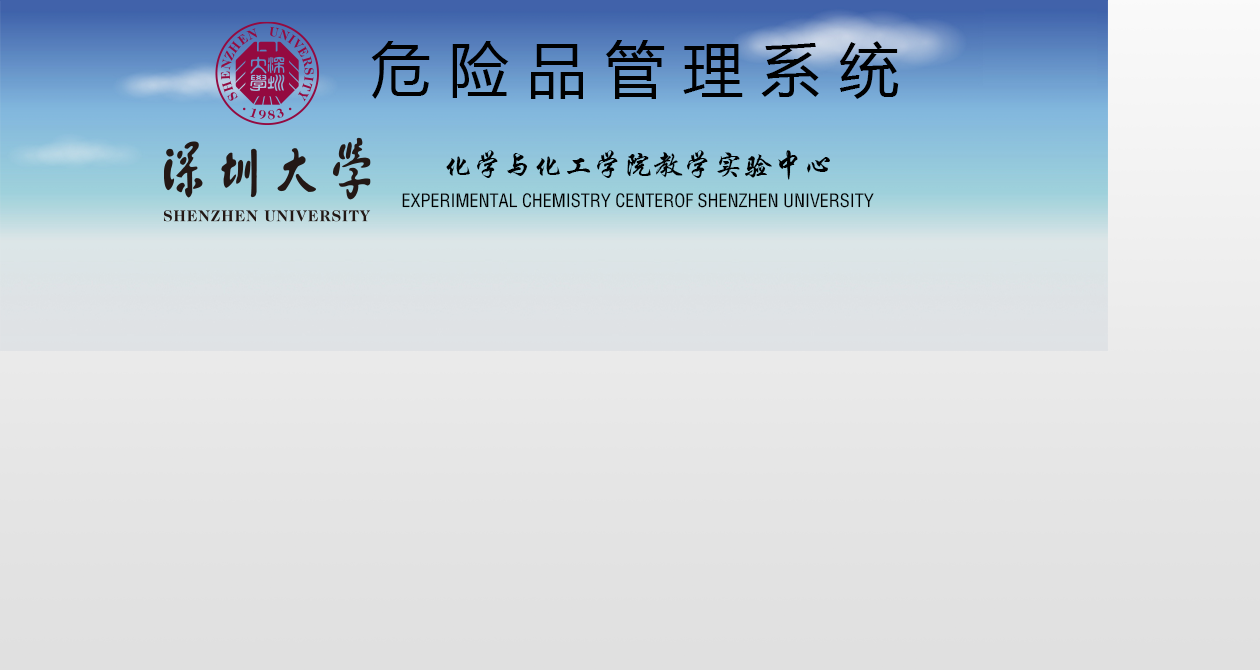
<style>
.page{position:relative;width:1260px;height:670px}
.page>*{position:absolute;margin:0}
.t1{font:60px "YaHei-Consolas-Hybrid";letter-spacing:0.3em;color:#000000}
.t2{font:30px "STXingkai";color:#000000}
.t3{font:18px "FZYTK--GBK1-0";color:#000000}
</style>
<div class="page">
<p class="t1" style="left:371px;top:40px;width:528px;height:59px">危险品管理系统</p>
<p class="t2" style="left:446px;top:150px;width:384px;height:30px">化学与化工学院教学实验中心</p>
<p class="t3" style="left:402px;top:193px;width:472px;height:15px">EXPERIMENTAL CHEMISTRY CENTEROF SHENZHEN UNIVERSITY</p>
</div>
